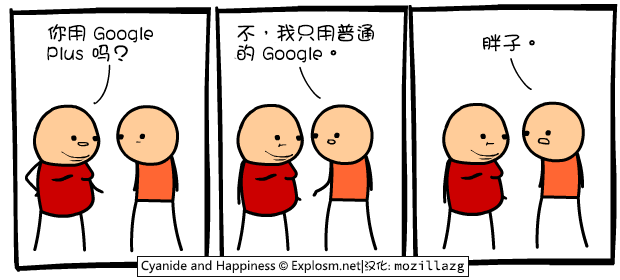
<style>
.page{position:relative;width:620px;height:280px;background:#ffffff}
.page>*{position:absolute;margin:0}
.t1{font:20px/20px "DFGirl";color:#000000}
.t2{font:20px "DFGirl";color:#000000}
</style>
<div class="page">
<p class="t1" style="left:47px;top:24px;width:106px;height:38px">你用 Google<br>Plus 吗？</p>
<p class="t1" style="left:237px;top:23px;width:137px;height:40px">不，我只用普通<br>的 Google。</p>
<p class="t2" style="left:483px;top:34px;width:52px;height:18px">胖子。</p>
</div>
